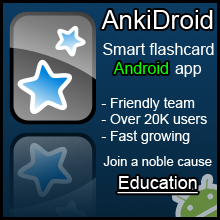
<style>
.page{position:relative;width:220px;height:220px}
.page>*{position:absolute;margin:0}
.t1{font:26px "ArialMT";color:#ffffff}
.t2{font:14px "ArialMT";color:#ffffff}
.t3{font:16px "ArialMT";color:#ffffff}
.t4{font:16px "ArialMT";color:#0cff00}
.t5{font:13px "ArialMT";color:#ffffff}
.t6{font:18px "ArialMT";color:#ffffff;text-decoration:underline}
</style>
<div class="page">
<p class="t1" style="left:101px;top:10px;width:112px;height:19px">AnkiDroid</p>
<p class="t2" style="left:101px;top:43px;width:113px;height:101px;text-align:center"><span class="t3">Smart flashcard Android app<br></span><br>- Friendly team<br>- Over 20K users<br>- Fast growing</p>
<p class="t4" style="left:113px;top:62px;width:55px;height:12px">Android</p>
<p class="t5" style="left:103px;top:156px;width:109px;height:10px">Join a noble cause</p>
<p class="t6" style="left:117px;top:176px;width:81px;height:18px">Education</p>
</div>
